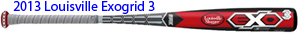
<style>
.page{position:relative;width:300px;height:34px;background:#ffffff}
.page>*{position:absolute;margin:0}
.t1{font:14px "MyriadPro-Regular";color:#0000ff}
</style>
<div class="page">
<p class="t1" style="left:13px;top:1px;width:142px;height:13px">2013 Louisville Exogrid 3</p>
</div>
